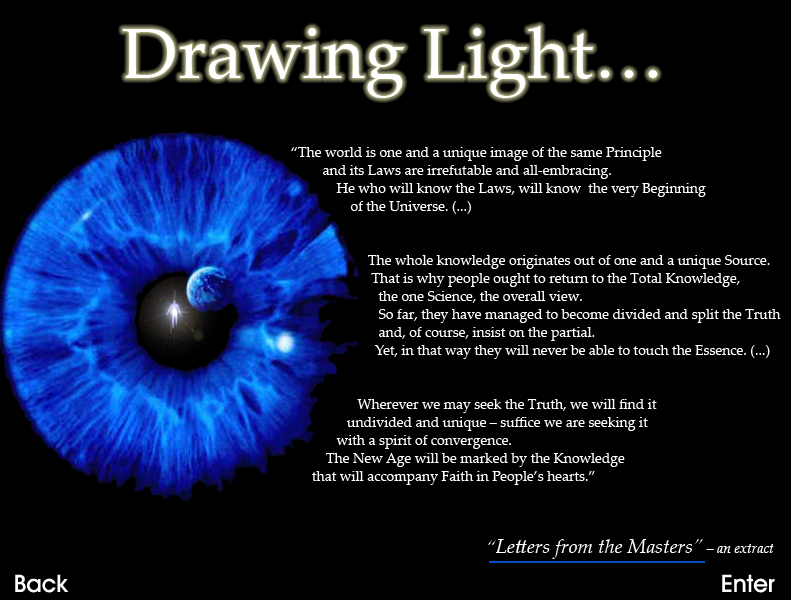
<style>
.page{position:relative;width:791px;height:600px;background:#000000}
.page>*{position:absolute;margin:0}
.t1{font:72px "PalatinoLinotype-Roman";color:#ffffff}
.t2{font:14px/18px "PalatinoLinotype-Roman";color:#ffffff}
.t3{font:20px/18px "PalatinoLinotype-Italic";color:#ffffff}
.t4{font:14px/18px "PalatinoLinotype-Italic";color:#ffffff}
.t5{font:24px "AvantGardeITCbyBT-Medium";color:#ffffff}
</style>
<div class="page">
<p class="t1" style="left:123px;top:26px;width:535px;height:72px">Drawing Light…</p>
<p class="t2" style="left:291px;top:147px;width:490px;height:412px">“The world is one and a unique image of the same Principle <br>         and its Laws are irrefutable and all-embracing. <br>             He who will know the Laws, will know  the very Beginning <br>                 of the Universe. (...)<br><br><br>                      The whole knowledge originates out of one and a unique Source. <br>                       That is why people ought to return to the Total Knowledge, <br>                         the one Science, the overall view. <br>                         So far, they have managed to become divided and split the Truth <br>                         and, of course, insist on the partial. <br>                        Yet, in that way they will never be able to touch the Essence. (...)<br><br><br>                   Wherever we may seek the Truth, we will find it <br>                undivided and unique – suffice we are seeking it <br>             with a spirit of convergence. <br>          The New Age will be marked by the Knowledge <br>      that will accompany Faith in People’s hearts.” <br><br><br><br>                                       <span class="t3">“Letters from the Masters”</span><span class="t4"> – an extract</span></p>
<p class="t5" style="left:15px;top:574px;width:54px;height:19px">Back</p>
<p class="t5" style="left:722px;top:574px;width:53px;height:19px">Enter</p>
</div>
